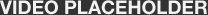
<style>
.page{position:relative;width:208px;height:15px;background:#333333}
.page>*{position:absolute;margin:0}
.t1{font:19px "HelveticaNeue-Bold";color:#f3f3f3}
</style>
<div class="page">
<p class="t1" style="left:0px;top:0px;width:207px;height:15px">VIDEO PLACEHOLDER</p>
</div>
